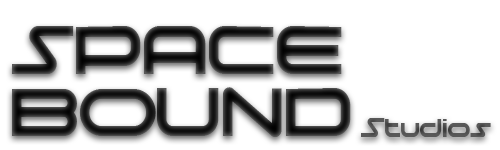
<style>
.page{position:relative;width:500px;height:150px;background:#ffffff}
.page>*{position:absolute;margin:0}
.t1{font:86.8px/62.5px "moonhouse";scale:0.91 1}
.t2{font:34.7px "moonhouse";color:#595959;scale:0.86 1}
</style>
<div class="page">
<p class="t1" style="left:12px;top:26px;width:339px;height:111px">SPACE<br>BOUND</p>
<p class="t2" style="left:361px;top:118px;width:130px;height:19px">Studios</p>
</div>
